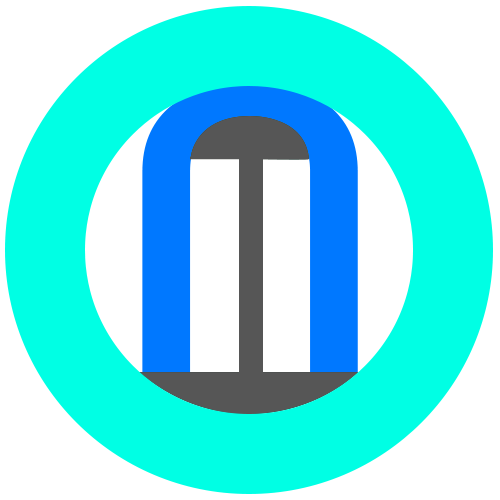
<style>
.page{position:relative;width:500px;height:500px;background:#ffffff}
.page>*{position:absolute;margin:0}
.t1{font:425.6px "SimHei";color:#0078ff;scale:1.25 1}
</style>
<div class="page">
<p class="t1" style="left:142px;top:85px;width:216px;height:288px;rotate:180deg">U</p>
</div>
